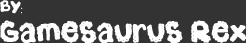
<style>
.page{position:relative;width:246px;height:43px;background:#333333}
.page>*{position:absolute;margin:0}
.t1{font:20px "dinosaur";color:#ffffff}
</style>
<div class="page">
<p class="t1" style="left:0px;top:0px;width:246px;height:44px">By:<br>Gamesaurus Rex</p>
</div>
